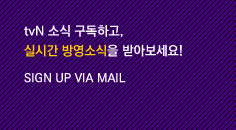
<style>
.page{position:relative;width:236px;height:130px;background:#43007a}
.page>*{position:absolute;margin:0}
.t1{font:12px/25.8px "KoPubDotumBold";color:#ffffff}
.t2{font:13px/19.8px "KoPubDotumBold";color:#ffffff}
.t3{font:13px/27.8px "KoPubDotumBold";color:#ffc800}
.t4{font:13px/27.8px "KoPubDotumBold";color:#ffffff}
</style>
<div class="page">
<p class="t1" style="left:24px;top:25px;width:158px;height:58px"><span class="t2">tvN 소식 구독하고,<br></span><span class="t3">실시간 방영소식</span><span class="t4">을 받아보세요!<br></span>SIGN UP VIA MAIL</p>
</div>
